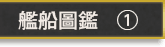
<style>
.page{position:relative;width:165px;height:47px}
.page>*{position:absolute;margin:0}
.t1{font:20px "GothicMB101Pr6N-Medium";color:#f2ebe5}
</style>
<div class="page">
<p class="t1" style="left:18px;top:10px;width:80px;height:20px">艦船圖鑑</p>
</div>
